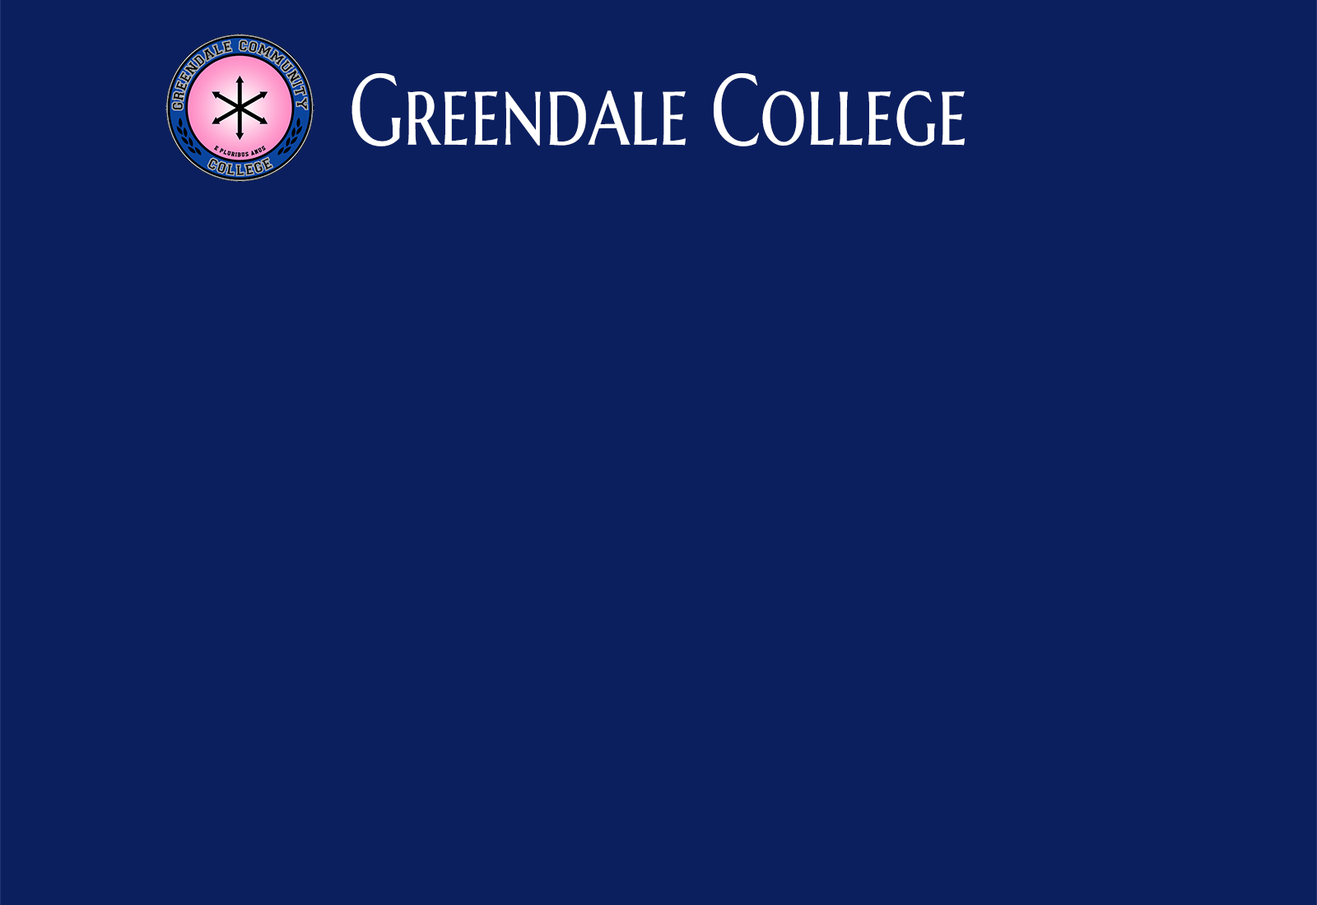
<style>
.page{position:relative;width:1317px;height:905px;background:#0b1f5f}
.page>*{position:absolute;margin:0}
.t1{font:100.3px "MarcellusSC-Regular";color:#ffffff;scale:0.73 1}
</style>
<div class="page">
<p class="t1" style="left:351px;top:73px;width:614px;height:74px">Greendale College</p>
</div>
